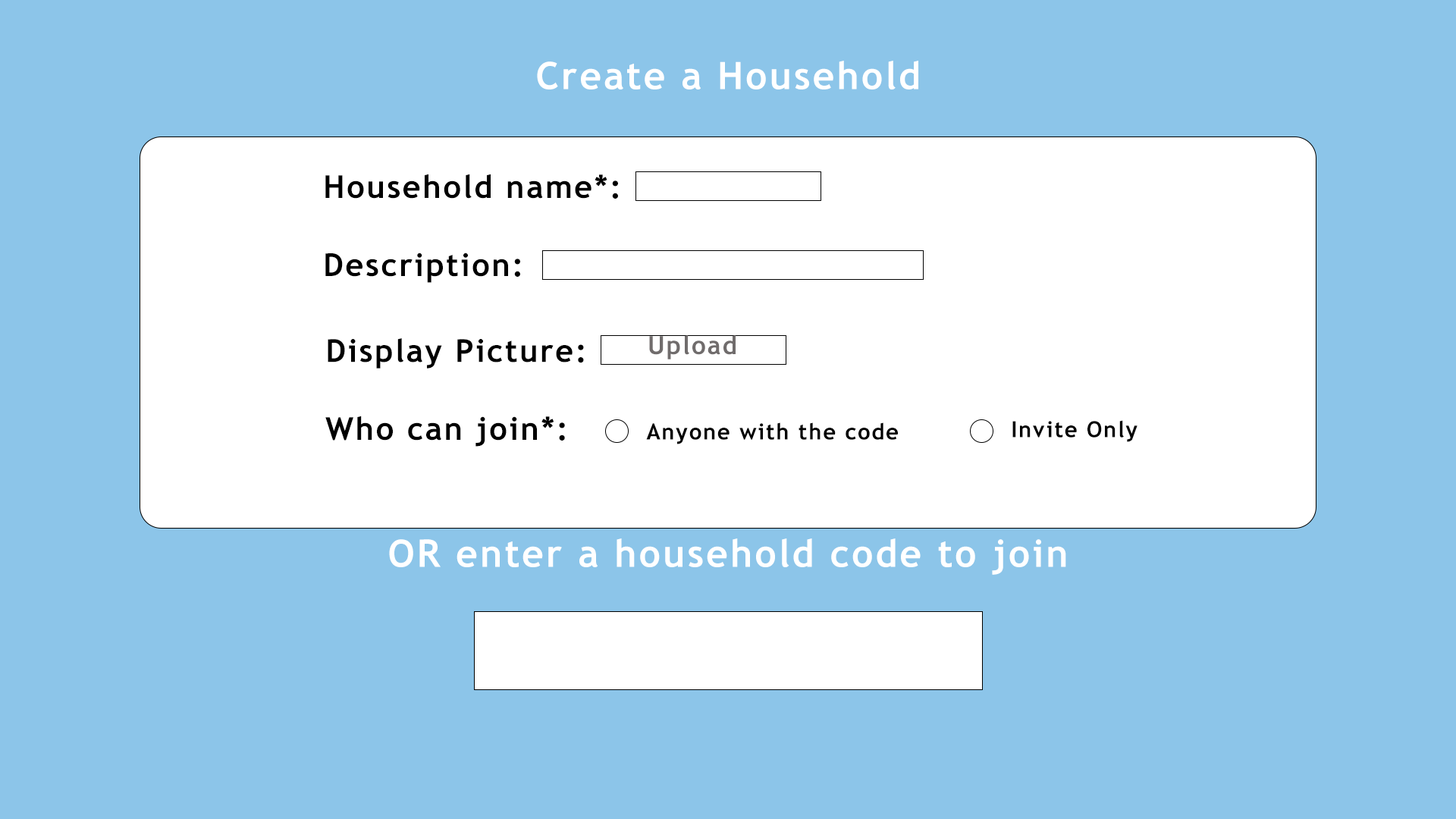
<style>
.page{position:relative;width:1456px;height:819px;background:#8cc5e9}
.page>*{position:absolute;margin:0}
.t1{font:37.9px "TrebuchetMS-Bold";letter-spacing:0.06em;color:#ffffff}
.t2{font:31.6px "TrebuchetMS-Bold";letter-spacing:0.06em;color:#000000}
.t3{font:25.3px "TrebuchetMS-Bold";letter-spacing:0.06em;color:#706c6c}
.t4{font:22.1px "TrebuchetMS-Bold";letter-spacing:0.06em;color:#000000}
</style>
<div class="page">
<p class="t1" style="left:537px;top:61px;width:381px;height:28px">Create a Household</p>
<p class="t2" style="left:325px;top:174px;width:293px;height:25px">Household name*:</p>
<p class="t2" style="left:325px;top:253px;width:195px;height:30px">Description:</p>
<p class="t2" style="left:328px;top:338px;width:256px;height:31px">Display Picture:</p>
<p class="t3" style="left:649px;top:335px;width:87px;height:24px">Upload</p>
<p class="t2" style="left:325px;top:416px;width:240px;height:31px">Who can join*:</p>
<p class="t4" style="left:646px;top:422px;width:252px;height:22px">Anyone with the code</p>
<p class="t4" style="left:1012px;top:420px;width:125px;height:22px">Invite Only</p>
<p class="t1" style="left:389px;top:538px;width:677px;height:37px">OR enter a household code to join</p>
</div>
